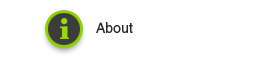
<style>
.page{position:relative;width:253px;height:57px;background:#ffffff}
.page>*{position:absolute;margin:0}
.t1{font:14px "Helvetica";color:#282828}
</style>
<div class="page">
<p class="t1" style="left:96px;top:22px;width:37px;height:11px">About</p>
</div>
